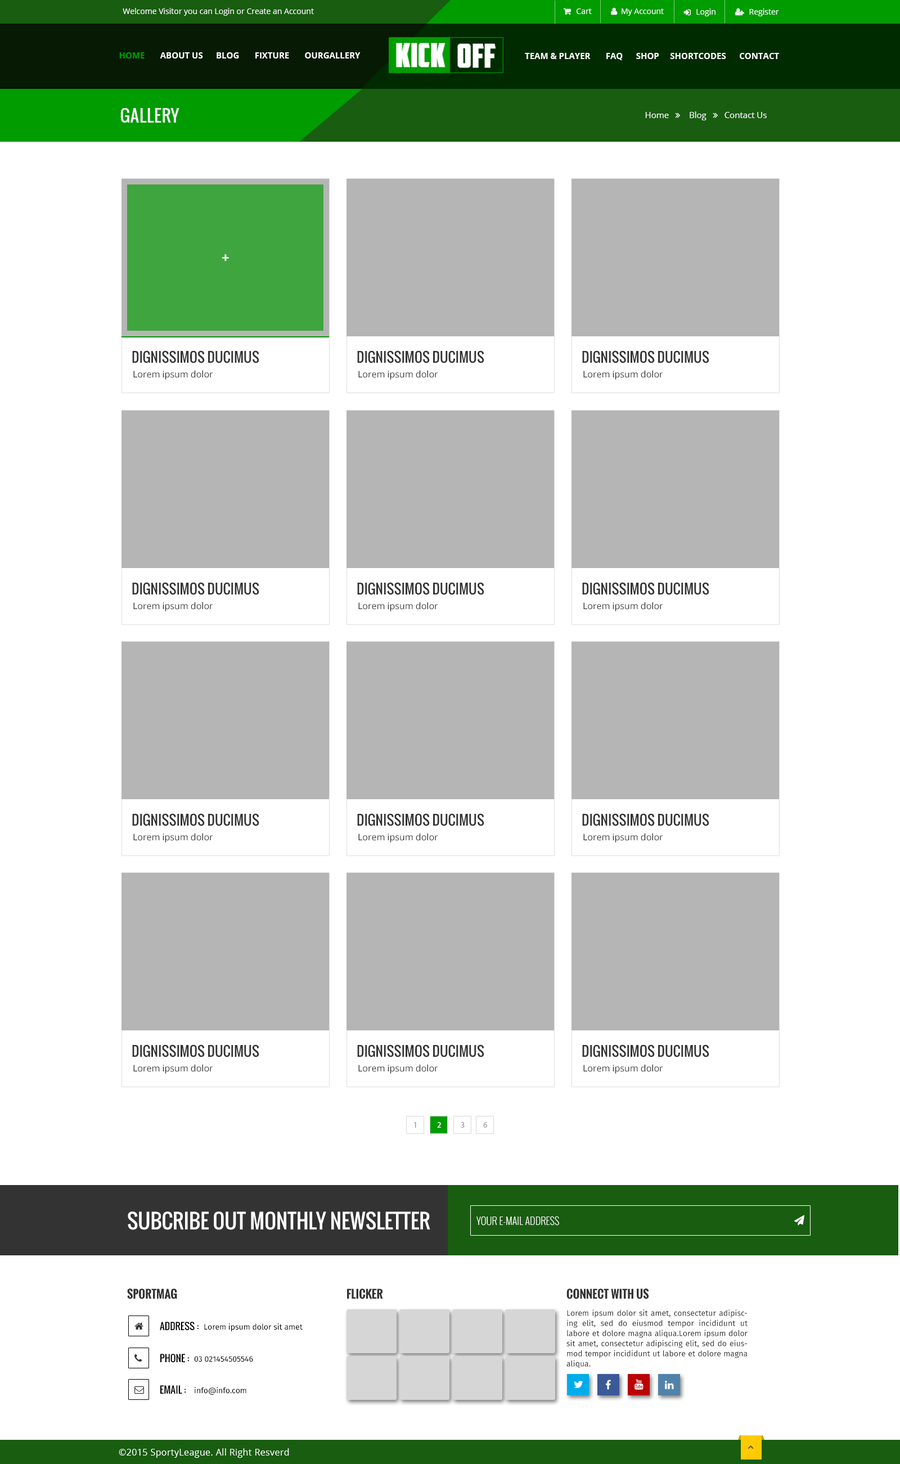
<style>
.page{position:relative;width:900px;height:1464px;background:#ffffff}
.page>*{position:absolute;margin:0}
.t1{font:7.9px "OpenSans";color:#f4f5f5}
.t2{font:8.4px "OpenSans-Bold";color:#ffffff;text-transform:uppercase}
.t3{font:8.4px "OpenSans-Bold";color:#009c00;text-transform:uppercase}
.t4{font:16.9px "Oswald";color:#f4f5f5;text-transform:uppercase}
.t5{font:27px "Oswald-Light";color:#ffffff;text-transform:uppercase}
.t6{font:13.5px "Oswald-Regular";color:#333333;text-transform:uppercase}
.t7{font:9px "OpenSans";color:#333333}
.t8{font:7.9px "MyriadPro-Regular";color:#999999;text-transform:uppercase}
.t9{font:7.9px "MyriadPro-Regular";color:#ffffff;text-transform:uppercase}
.t10{font:20.2px "Oswald-Regular";color:#ffffff;text-transform:uppercase}
.t11{font:10.1px "Oswald-Light";color:#ffffff;text-transform:uppercase}
.t12{font:11.2px "Oswald-Bold";color:#333333;text-transform:uppercase}
.t13{font:7.9px/10.1px "FiraSans-Regular";color:#333333}
.t14{font:9.6px "Oswald-Regular";color:#000000;text-transform:uppercase}
.t15{font:7.9px "FiraSans-Regular";color:#000000}
.t16{font:9px "OpenSans";letter-spacing:0.025em;color:#ffffff}
</style>
<div class="page">
<p class="t1" style="left:123px;top:8px;width:191px;height:8px">Welcome Visitor you can Login or Create an Account</p>
<p class="t1" style="left:577px;top:8px;width:15px;height:6px">Cart</p>
<p class="t1" style="left:622px;top:8px;width:42px;height:8px">My Account</p>
<p class="t1" style="left:696px;top:8px;width:20px;height:8px">Login</p>
<p class="t1" style="left:749px;top:8px;width:30px;height:8px">Register</p>
<p class="t2" style="left:119px;top:52px;width:242px;height:6px"><span class="t3">Home </span>      About Us      Blog       Fixture       OURGallery</p>
<p class="t2" style="left:525px;top:53px;width:254px;height:7px">Team &amp; player       FAQ      SHOP     SHORTCODES      CONTACT</p>
<p class="t4" style="left:120px;top:108px;width:59px;height:15px">Gallery</p>
<p class="t5" style="left:222px;top:254px;width:7px;height:7px">+</p>
<p class="t6" style="left:132px;top:350px;width:127px;height:13px">dignissimos ducimus</p>
<p class="t6" style="left:357px;top:350px;width:127px;height:13px">dignissimos ducimus</p>
<p class="t6" style="left:582px;top:350px;width:127px;height:13px">dignissimos ducimus</p>
<p class="t7" style="left:133px;top:370px;width:80px;height:10px">Lorem ipsum dolor</p>
<p class="t7" style="left:358px;top:370px;width:80px;height:10px">Lorem ipsum dolor</p>
<p class="t7" style="left:583px;top:370px;width:80px;height:10px">Lorem ipsum dolor</p>
<p class="t6" style="left:132px;top:582px;width:127px;height:13px">dignissimos ducimus</p>
<p class="t6" style="left:357px;top:582px;width:127px;height:13px">dignissimos ducimus</p>
<p class="t6" style="left:582px;top:582px;width:127px;height:13px">dignissimos ducimus</p>
<p class="t7" style="left:133px;top:602px;width:80px;height:9px">Lorem ipsum dolor</p>
<p class="t7" style="left:358px;top:602px;width:80px;height:9px">Lorem ipsum dolor</p>
<p class="t7" style="left:583px;top:602px;width:80px;height:9px">Lorem ipsum dolor</p>
<p class="t6" style="left:132px;top:813px;width:127px;height:13px">dignissimos ducimus</p>
<p class="t6" style="left:357px;top:813px;width:127px;height:13px">dignissimos ducimus</p>
<p class="t6" style="left:582px;top:813px;width:127px;height:13px">dignissimos ducimus</p>
<p class="t7" style="left:133px;top:833px;width:80px;height:10px">Lorem ipsum dolor</p>
<p class="t7" style="left:358px;top:833px;width:80px;height:10px">Lorem ipsum dolor</p>
<p class="t7" style="left:583px;top:833px;width:80px;height:10px">Lorem ipsum dolor</p>
<p class="t6" style="left:132px;top:1045px;width:127px;height:13px">dignissimos ducimus</p>
<p class="t6" style="left:357px;top:1045px;width:127px;height:13px">dignissimos ducimus</p>
<p class="t6" style="left:582px;top:1045px;width:127px;height:13px">dignissimos ducimus</p>
<p class="t7" style="left:133px;top:1064px;width:80px;height:10px">Lorem ipsum dolor</p>
<p class="t7" style="left:358px;top:1064px;width:80px;height:10px">Lorem ipsum dolor</p>
<p class="t7" style="left:583px;top:1064px;width:80px;height:10px">Lorem ipsum dolor</p>
<p class="t8" style="left:414px;top:1122px;width:2px;height:6px">1</p>
<p class="t9" style="left:437px;top:1122px;width:4px;height:6px">2</p>
<p class="t8" style="left:461px;top:1122px;width:4px;height:6px">3</p>
<p class="t8" style="left:483px;top:1122px;width:4px;height:6px">6</p>
<p class="t10" style="left:128px;top:1212px;width:302px;height:18px">Subcribe out monthly newsletter</p>
<p class="t11" style="left:476px;top:1216px;width:83px;height:10px">your e-mail address</p>
<p class="t12" style="left:127px;top:1289px;width:50px;height:10px">sportmag</p>
<p class="t12" style="left:347px;top:1289px;width:36px;height:10px">flicker</p>
<p class="t12" style="left:566px;top:1289px;width:83px;height:10px">connect with us</p>
<p class="t13" style="left:566px;top:1310px;width:182px;height:59px;text-align:justify">Lorem ipsum dolor sit amet, consectetur adipiscing elit, sed do eiusmod tempor incididunt ut labore et dolore magna aliqua.Lorem ipsum dolor sit amet, consectetur adipiscing elit, sed do eiusmod tempor incididunt ut labore et dolore magna aliqua.</p>
<p class="t14" style="left:160px;top:1322px;width:39px;height:9px">address :</p>
<p class="t15" style="left:204px;top:1324px;width:99px;height:7px">Lorem ipsum dolor sit amet</p>
<p class="t14" style="left:160px;top:1354px;width:29px;height:9px">Phone :</p>
<p class="t15" style="left:194px;top:1356px;width:59px;height:6px">03 021454505546</p>
<p class="t14" style="left:160px;top:1385px;width:26px;height:9px">email :</p>
<p class="t15" style="left:195px;top:1387px;width:51px;height:8px">info@info.com</p>
<p class="t16" style="left:119px;top:1448px;width:170px;height:10px">©2015 SportyLeague. All Right Resverd</p>
</div>
